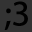
<style>
.page{position:relative;width:32px;height:32px;background:#333333}
.page>*{position:absolute;margin:0}
.t1{font:36px "MyriadPro-Regular";color:#000000}
</style>
<div class="page">
<p class="t1" style="left:4px;top:1px;width:24px;height:29px">;3</p>
</div>
